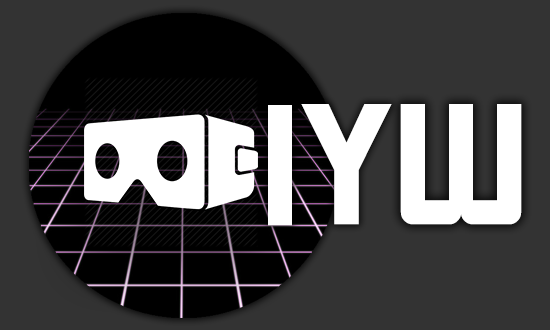
<style>
.page{position:relative;width:550px;height:330px;background:#333333}
.page>*{position:absolute;margin:0}
.t1{font:166.7px "Cornerstone";letter-spacing:-0.03em;color:#ffffff}
</style>
<div class="page">
<p class="t1" style="left:268px;top:105px;width:24px;height:121px">I</p>
<p class="t1" style="left:301px;top:104px;width:91px;height:121px">Y</p>
<p class="t1" style="left:400px;top:104px;width:122px;height:121px">W</p>
</div>
